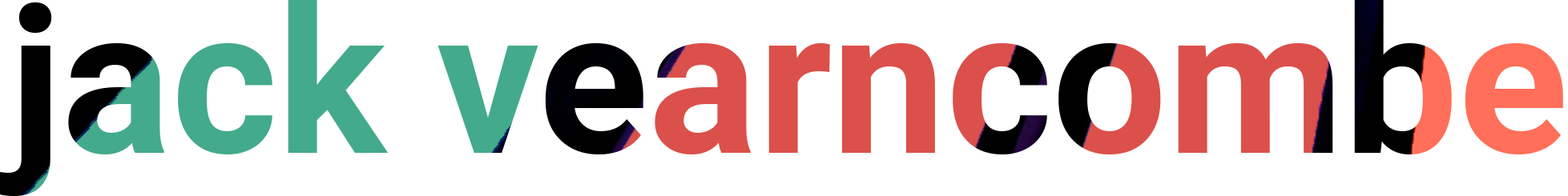
<style>
.page{position:relative;width:1568px;height:196px;background:#ffffff}
.page>*{position:absolute;margin:0}
.t1{font:203.6px "Roboto-Bold"}
</style>
<div class="page">
<p class="t1" style="left:0px;top:0px;width:1563px;height:196px">jack vearncombe</p>
</div>
